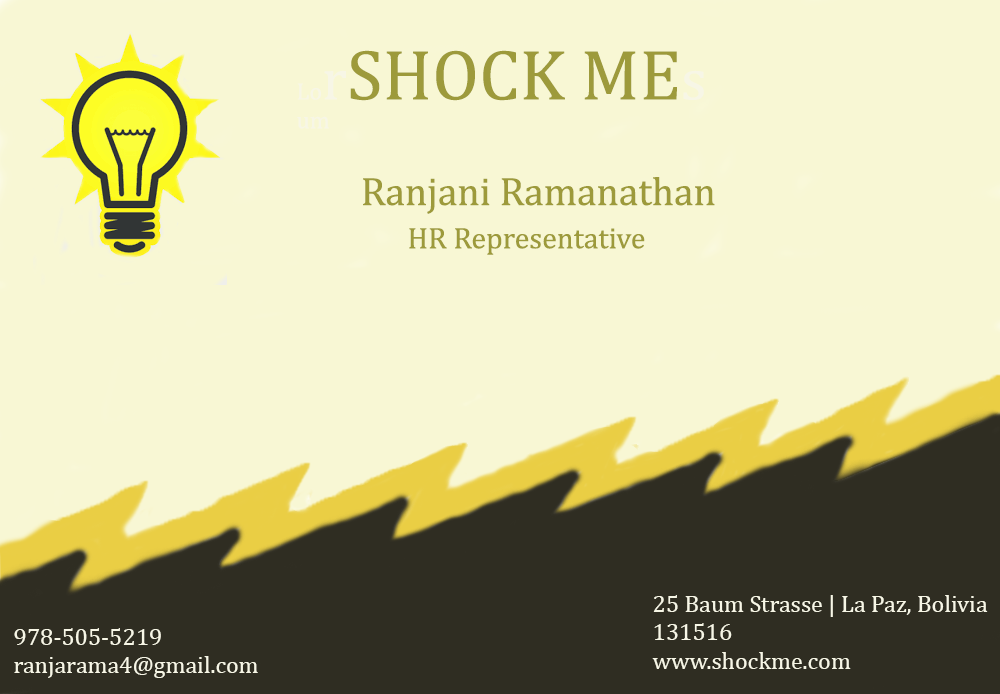
<style>
.page{position:relative;width:1000px;height:694px;background:#f8f7d4}
.page>*{position:absolute;margin:0}
.t1{font:40px "Cambria";color:#9d9a3b}
.t2{font:24px "Cambria";color:#f7f6e6}
.t3{font:60px "Cambria";color:#f7f6e6}
.t4{font:72px "Cambria";color:#9d9a3b}
.t5{font:30px "Cambria";color:#9d9a3b}
</style>
<div class="page">
<p class="t1" style="left:297px;top:50px;width:418px;height:205px"><span class="t2">Lo</span><span class="t3">r</span><span class="t4">SHOCK ME</span><span class="t3">s<br></span><span class="t2">um          <br><br>       </span> Ranjani Ramanathan<br>              <span class="t5">HR Representative</span></p>
<p class="t2" style="left:652px;top:595px;width:336px;height:74px">25 Baum Strasse | La Paz, Bolivia<br>131516 <br>www.shockme.com</p>
<p class="t2" style="left:14px;top:628px;width:244px;height:50px">978-505-5219<br>ranjarama4@gmail.com</p>
</div>
